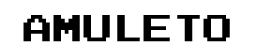
<style>
.page{position:relative;width:258px;height:55px;background:#ffffff}
.page>*{position:absolute;margin:0}
.t1{font:30px "PressStart2P";color:#000000}
</style>
<div class="page">
<p class="t1" style="left:23px;top:15px;width:207px;height:27px">AMULETO</p>
</div>
